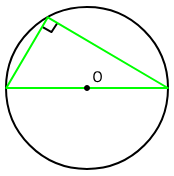
<style>
.page{position:relative;width:174px;height:176px;background:#ffffff}
.page>*{position:absolute;margin:0}
.t1{font:15.2px "PTSans-Regular";color:#000000}
</style>
<div class="page">
<p class="t1" style="left:93px;top:71px;width:9px;height:12px">O</p>
</div>
